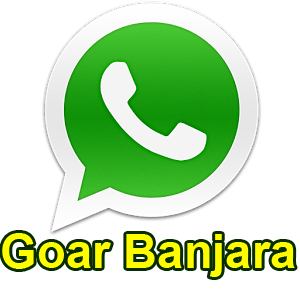
<style>
.page{position:relative;width:300px;height:300px;background:#ffffff}
.page>*{position:absolute;margin:0}
.t1{font:47.2px "Arial-BoldMT";color:#fffc00}
</style>
<div class="page">
<p class="t1" style="left:2px;top:233px;width:293px;height:44px">Goar Banjara</p>
</div>
